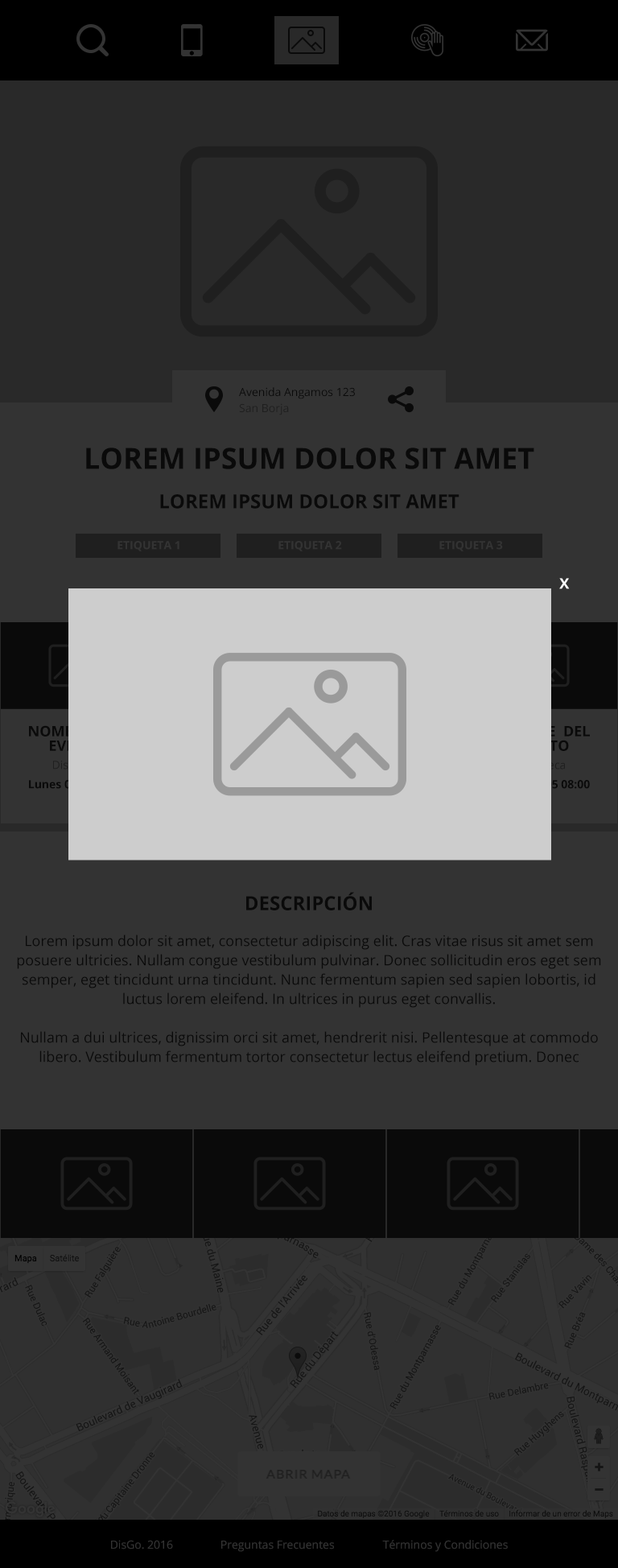
<style>
.page{position:relative;width:618px;height:1568px;background:#333333}
.page>*{position:absolute;margin:0}
.t1{font:11.3px/16.2px "OpenSans"}
.t2{font:29.1px "OpenSans-Bold";color:#0a0a0a;text-transform:uppercase}
.t3{font:19.4px "OpenSans-Bold";color:#0a0a0a;text-transform:uppercase}
.t4{font:11.3px "OpenSans-Bold";color:#333333;text-transform:uppercase}
.t5{font:14.5px "OpenSans-Bold";color:#ffffff}
.t6{font:19.3px "OpenSans-Bold";color:#0a0a0a;text-transform:uppercase}
.t7{font:14.5px/19.3px "OpenSans";color:#0a0a0a}
.t8{font:11.3px "OpenSans";color:#333333}
</style>
<div class="page">
<p class="t1" style="left:239px;top:387px;width:116px;height:28px">Avenida Angamos 123<br>San Borja</p>
<p class="t2" style="left:86px;top:448px;width:448px;height:21px">Lorem ipsum dolor sit amet</p>
<p class="t3" style="left:160px;top:494px;width:300px;height:15px">Lorem ipsum dolor sit amet</p>
<p class="t4" style="left:118px;top:541px;width:61px;height:10px">Etiqueta 1</p>
<p class="t4" style="left:279px;top:541px;width:63px;height:10px">Etiqueta 2</p>
<p class="t4" style="left:439px;top:541px;width:64px;height:10px">Etiqueta 3</p>
<p class="t5" style="left:559px;top:578px;width:11px;height:11px">X</p>
<p class="t6" style="left:246px;top:892px;width:126px;height:18px">Descripción</p>
<p class="t7" style="left:17px;top:935px;width:584px;height:131px;text-align:center">Lorem ipsum dolor sit amet, consectetur adipiscing elit. Cras vitae risus sit amet sem posuere ultricies. Nullam congue vestibulum pulvinar. Donec sollicitudin eros eget sem semper, eget tincidunt urna tincidunt. Nunc fermentum sapien sed sapien lobortis, id luctus lorem eleifend. In ultrices in purus eget convallis.<br><br>Nullam a dui ultrices, dignissim orci sit amet, hendrerit nisi. Pellentesque at commodo libero. Vestibulum fermentum tortor consectetur lectus eleifend pretium. Donec pulvinar efficitur justo quis placerat. Pellentesque at iaculis lacus. Morbi facilisis mauris nibh, a gravida erat tristique et.</p>
<p class="t8" style="left:111px;top:1540px;width:62px;height:9px">DisGo. 2016</p>
<p class="t8" style="left:221px;top:1541px;width:113px;height:11px">Preguntas Frecuentes</p>
<p class="t8" style="left:382px;top:1540px;width:126px;height:12px">Términos y Condiciones</p>
</div>
